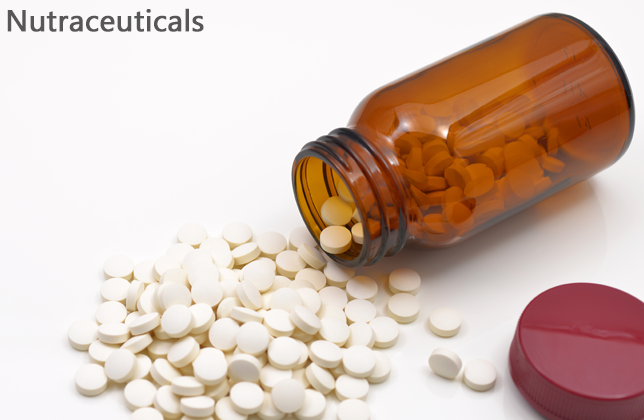
<style>
.page{position:relative;width:644px;height:420px}
.page>*{position:absolute;margin:0}
.t1{font:30px "Gadugi";color:#575757;font-weight:bold}
</style>
<div class="page">
<p class="t1" style="left:7px;top:8px;width:197px;height:24px">Nutraceuticals</p>
</div>
